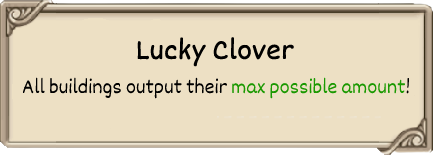
<style>
.page{position:relative;width:433px;height:155px;background:#ede0c4}
.page>*{position:absolute;margin:0}
.t1{font:30px "Dekko";color:#000000;font-weight:bold}
.t2{font:21px "Dekko";color:#000000}
.t3{font:21px "Dekko";color:#1b9902}
</style>
<div class="page">
<p class="t1" style="left:137px;top:37px;width:157px;height:30px">Lucky Clover</p>
<p class="t2" style="left:22px;top:77px;width:388px;height:22px">All buildings output their <span class="t3">max possible amount</span>!</p>
</div>
